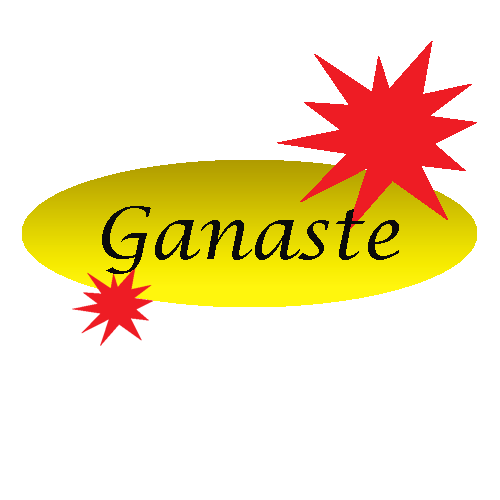
<style>
.page{position:relative;width:500px;height:500px;background:#ffffff}
.page>*{position:absolute;margin:0}
.t1{font:72px "LucidaCalligraphy-Italic";color:#0a0a0a}
</style>
<div class="page">
<p class="t1" style="left:102px;top:206px;width:297px;height:68px">Ganaste</p>
</div>
